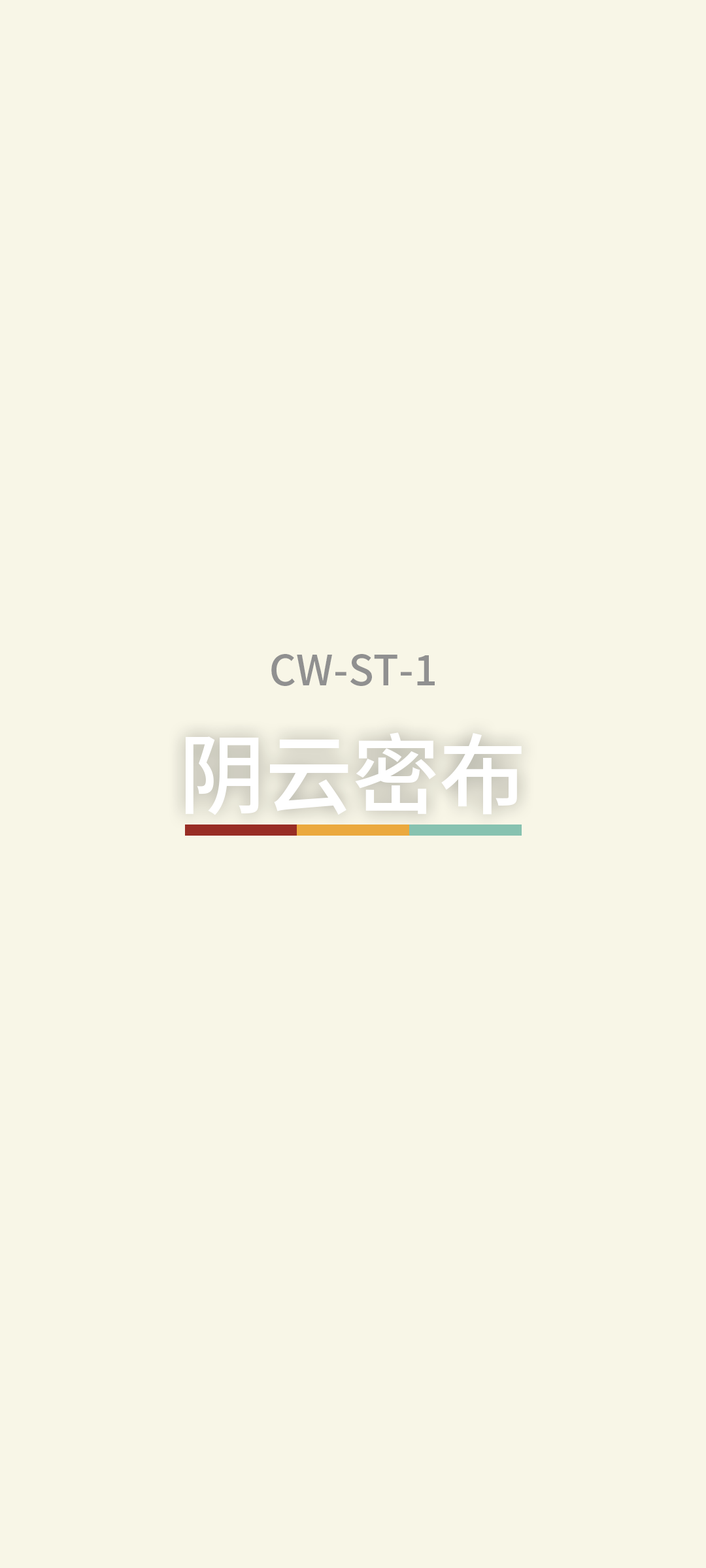
<style>
.page{position:relative;width:706px;height:1568px;background:#f8f6e7}
.page>*{position:absolute;margin:0}
.t1{font:41.5px "SourceHanSansCN-Medium";color:#909090}
.t2{font:86.9px "SourceHanSansCN-Medium";color:#ffffff}
</style>
<div class="page">
<p class="t1" style="left:271px;top:654px;width:163px;height:32px">CW-ST-1</p>
<p class="t2" style="left:186px;top:732px;width:335px;height:83px">阴云密布</p>
</div>
